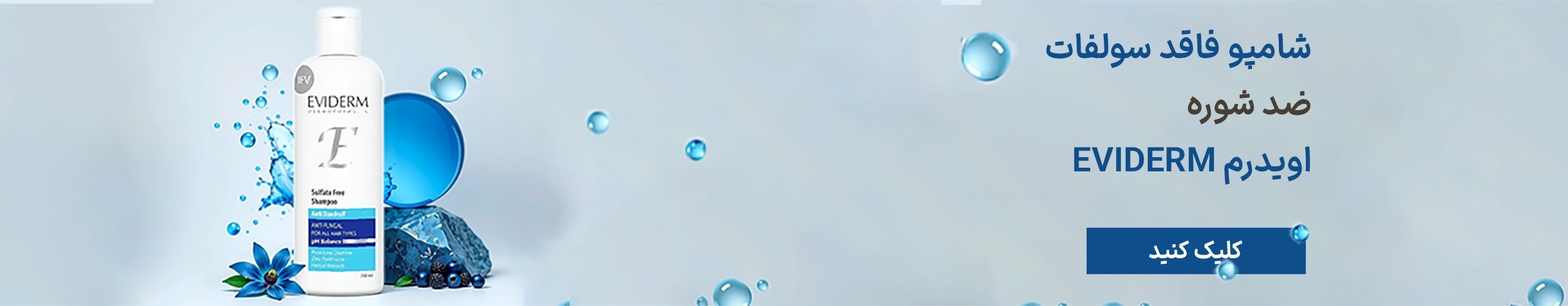
<style>
.page{position:relative;width:1568px;height:306px}
.page>*{position:absolute;margin:0}
.t1{font:34px/56.7px "IRANSansXFaNum-BoldD4";color:#0e4e8c}
.t2{font:34px/56.7px "IRANSansXFaNum-BoldD4";color:#463f36}
.t3{font:34px/56.7px "IRANSansXFaNum-BoldD4";color:#0e4e8b}
.t4{font:23.9px "IRANSansXFaNum-BoldD4";color:#ffffff;scale:0.96 1}
</style>
<div class="page">
<p class="t1" style="left:1046px;top:29px;width:265px;height:156px;text-align:right">شامپو فاقد سولفات<br><span class="t2">ضد شوره<br></span><span class="t3">اویدرم EVIDERM</span></p>
<p class="t4" style="left:1149px;top:241px;width:94px;height:24px">کلیک کنید</p>
</div>
